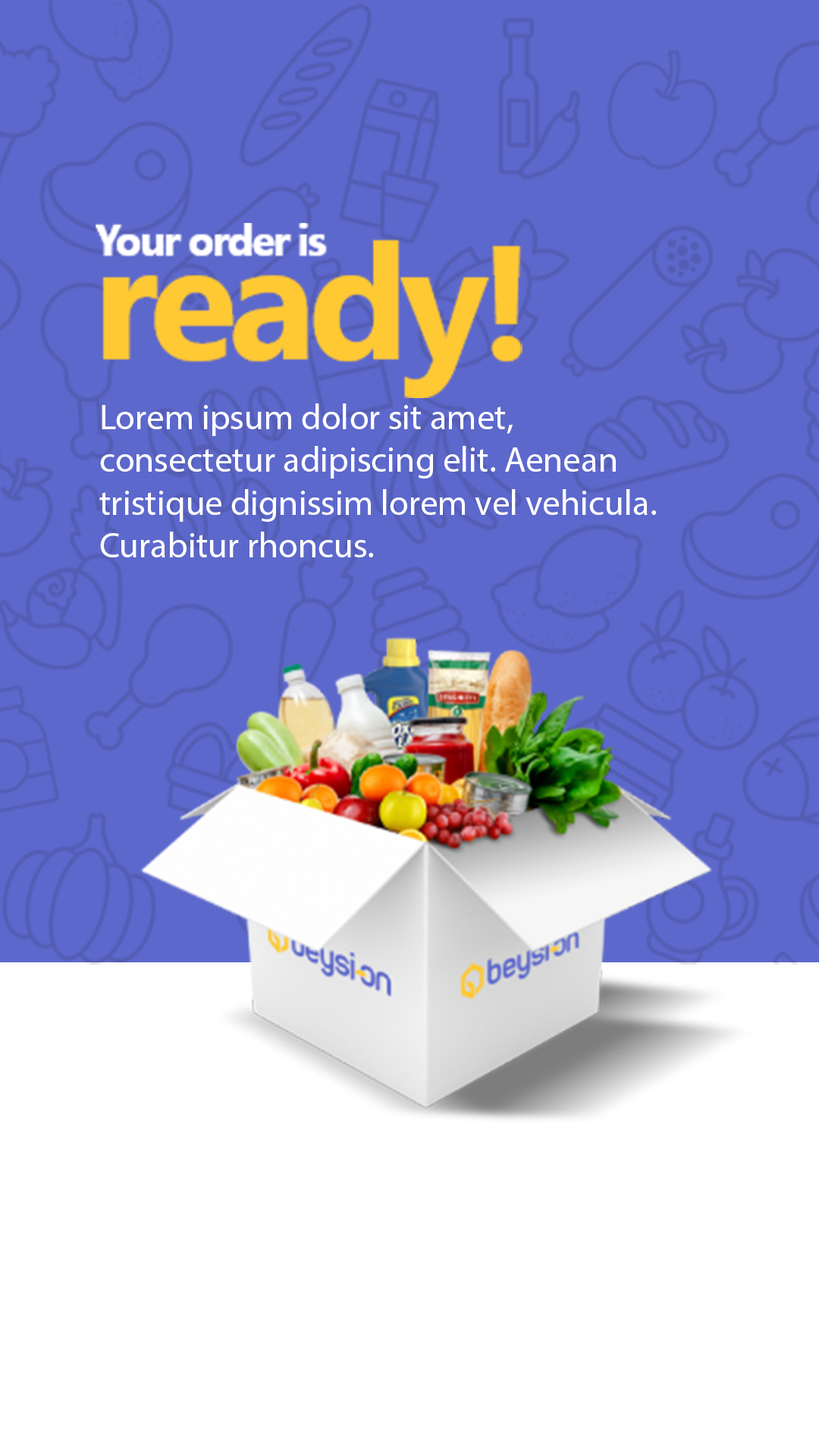
<style>
.page{position:relative;width:819px;height:1456px;background:#5d68cc}
.page>*{position:absolute;margin:0}
.t1{font:35.6px "MyriadPro-Regular";color:#ffffff}
</style>
<div class="page">
<p class="t1" style="left:99px;top:403px;width:557px;height:154px">Lorem ipsum dolor sit amet,<br>consectetur adipiscing elit. Aenean<br>tristique dignissim lorem vel vehicula. <br>Curabitur rhoncus.</p>
</div>
